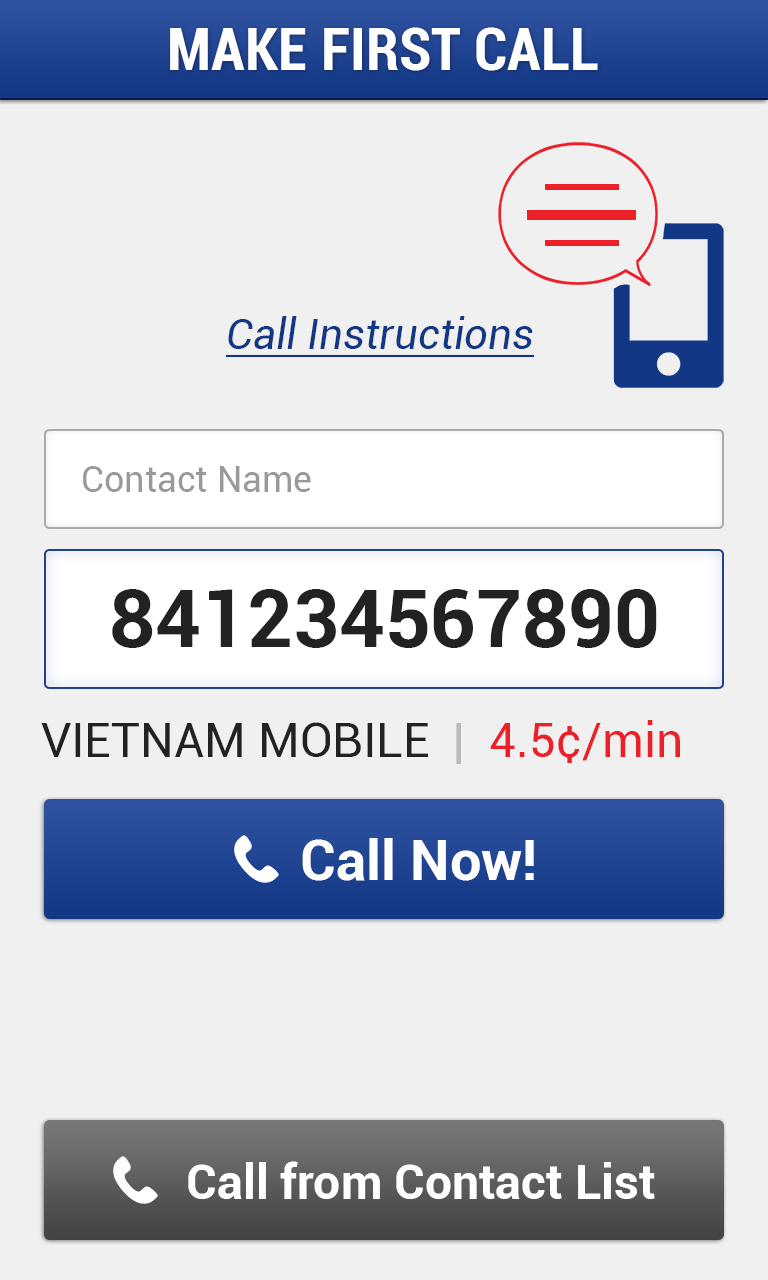
<style>
.page{position:relative;width:768px;height:1280px;background:#f0f0f0}
.page>*{position:absolute;margin:0}
.t1{font:60px "Roboto-BoldCondensed";color:#ffffff}
.t2{font:42px "Roboto-Italic";color:#123785;text-decoration:underline}
.t3{font:36px "Roboto-Regular";color:#999999}
.t4{font:80px "Roboto-Bold";color:#222222}
.t5{font:48px "Roboto-Regular";color:#222222}
.t6{font:48px "Roboto-Regular";color:#bbbbbb}
.t7{font:48px "Roboto-Regular";color:#ec2028}
.t8{font:56px "Roboto-Bold";color:#ffffff}
.t9{font:48px "Roboto-Bold";color:#ffffff}
</style>
<div class="page">
<p class="t1" style="left:170px;top:27px;width:428px;height:44px">MAKE FIRST CALL</p>
<p class="t2" style="left:225px;top:316px;width:310px;height:42px">Call Instructions</p>
<p class="t3" style="left:83px;top:466px;width:228px;height:26px">Contact Name</p>
<p class="t4" style="left:112px;top:589px;width:545px;height:59px">841234567890</p>
<p class="t5" style="left:41px;top:720px;width:639px;height:44px">VIETNAM MOBILE<span class="t6">  |  </span><span class="t7">4.5¢/min</span></p>
<p class="t8" style="left:302px;top:838px;width:232px;height:43px">Call Now!</p>
<p class="t9" style="left:188px;top:1161px;width:467px;height:38px">Call from Contact List</p>
</div>
